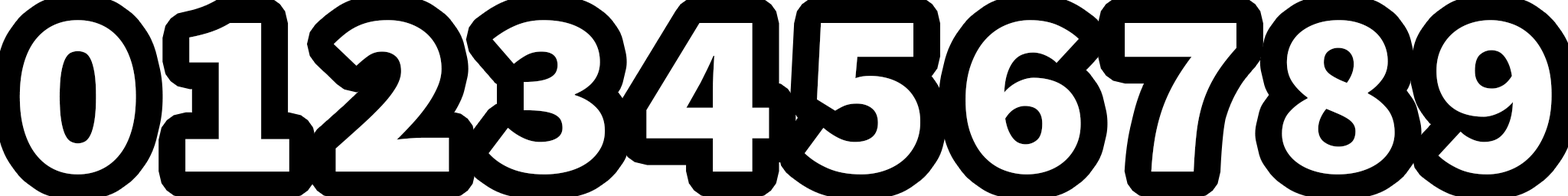
<style>
.page{position:relative;width:1568px;height:196px;background:#000000}
.page>*{position:absolute;margin:0}
.t1{font:234.1px "SourceSansPro-Black";letter-spacing:0.1em;color:#ffffff;scale:1.05 1}
</style>
<div class="page">
<p class="t1" style="left:19px;top:20px;width:1533px;height:155px">0123456789</p>
</div>
